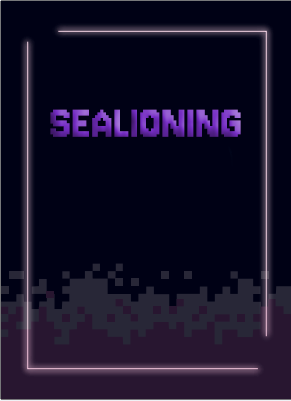
<style>
.page{position:relative;width:291px;height:401px;background:#000115}
.page>*{position:absolute;margin:0}
.t1{font:50px "Jersey10-Regular";letter-spacing:0.025em}
</style>
<div class="page">
<p class="t1" style="left:50px;top:109px;width:191px;height:28px">SEALIONING</p>
</div>
